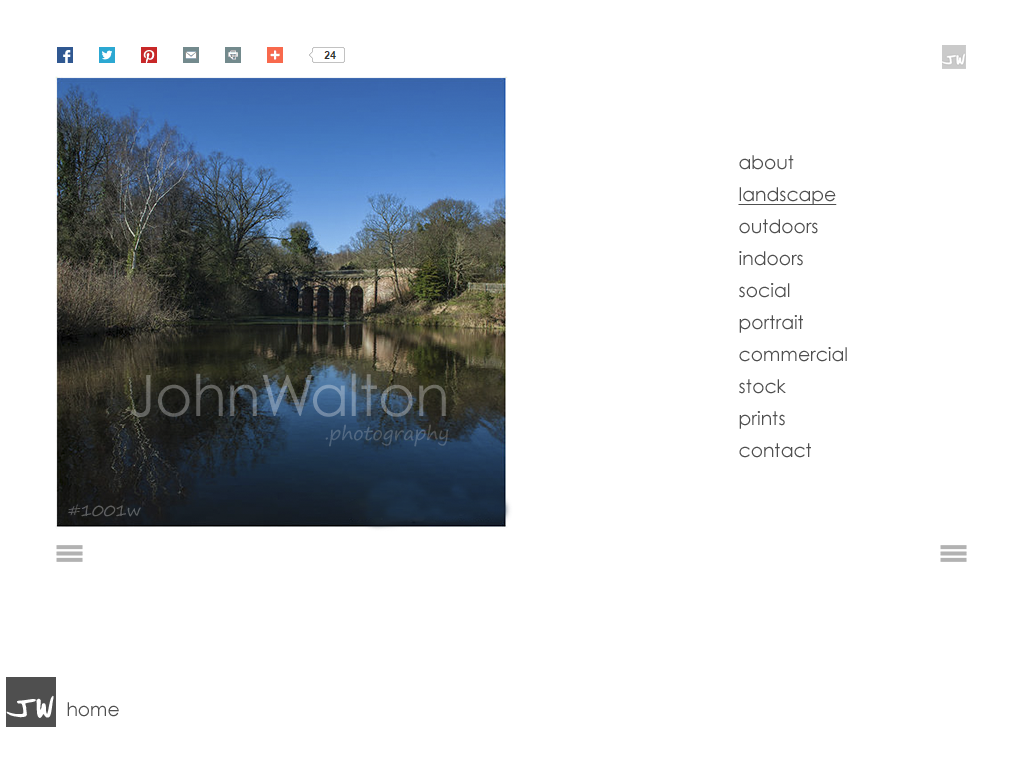
<style>
.page{position:relative;width:1024px;height:768px;background:#ffffff}
.page>*{position:absolute;margin:0}
.t1{font:18.7px/32px "CenturyGothic";color:#4f4f4f}
.t2{font:18.7px/32px "CenturyGothic";color:#4f4f4f;text-decoration:underline}
.t3{font:57.2px "CenturyGothic";letter-spacing:-0.01em}
.t4{font:57.2px "CenturyGothic";letter-spacing:-0.1em}
.t5{font:19.1px "SegoePrint";letter-spacing:-0.01em;color:#52657c}
.t6{font:16px "SegoePrint";letter-spacing:-0.01em;color:#5e5e5f}
.t7{font:18.7px "CenturyGothic";color:#4f4f4f}
</style>
<div class="page">
<p class="t1" style="left:738px;top:155px;width:109px;height:303px">about<br><span class="t2">landscape</span> <br>outdoors<br>indoors<br>social<br>portrait<br>commercial<br>stock<br>prints<br>contact</p>
<p class="t3" style="left:130px;top:373px;width:316px;height:44px">John<span class="t4">W</span>alton</p>
<p class="t5" style="left:325px;top:424px;width:123px;height:23px">.photography</p>
<p class="t6" style="left:68px;top:504px;width:73px;height:13px">#1001w</p>
<p class="t7" style="left:67px;top:702px;width:52px;height:15px">home</p>
</div>
